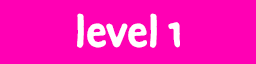
<style>
.page{position:relative;width:256px;height:64px;background:#ff00b4}
.page>*{position:absolute;margin:0}
.t1{font:48px "DuperPro-Bold";color:#ffffff}
</style>
<div class="page">
<p class="t1" style="left:77px;top:13px;width:103px;height:35px">level 1</p>
</div>
